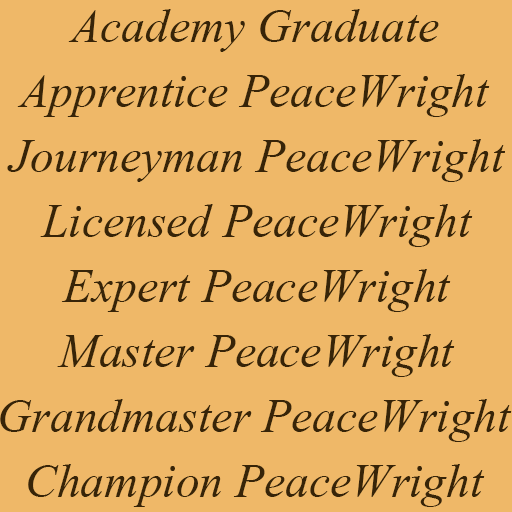
<style>
.page{position:relative;width:512px;height:512px;background:#efb868}
.page>*{position:absolute;margin:0}
.t1{font:72px "AngsanaNew-Italic";color:#372408}
</style>
<div class="page">
<p class="t1" style="left:68px;top:9px;width:371px;height:43px">Academy Graduate</p>
<p class="t1" style="left:17px;top:74px;width:473px;height:43px">Apprentice PeaceWright</p>
<p class="t1" style="left:7px;top:139px;width:498px;height:43px">Journeyman PeaceWright</p>
<p class="t1" style="left:40px;top:204px;width:433px;height:43px">Licensed PeaceWright</p>
<p class="t1" style="left:61px;top:269px;width:390px;height:43px">Expert PeaceWright</p>
<p class="t1" style="left:57px;top:334px;width:398px;height:43px">Master PeaceWright</p>
<p class="t1" style="left:0px;top:399px;width:512px;height:43px">Grandmaster PeaceWright</p>
<p class="t1" style="left:28px;top:464px;width:457px;height:43px">Champion PeaceWright</p>
</div>
